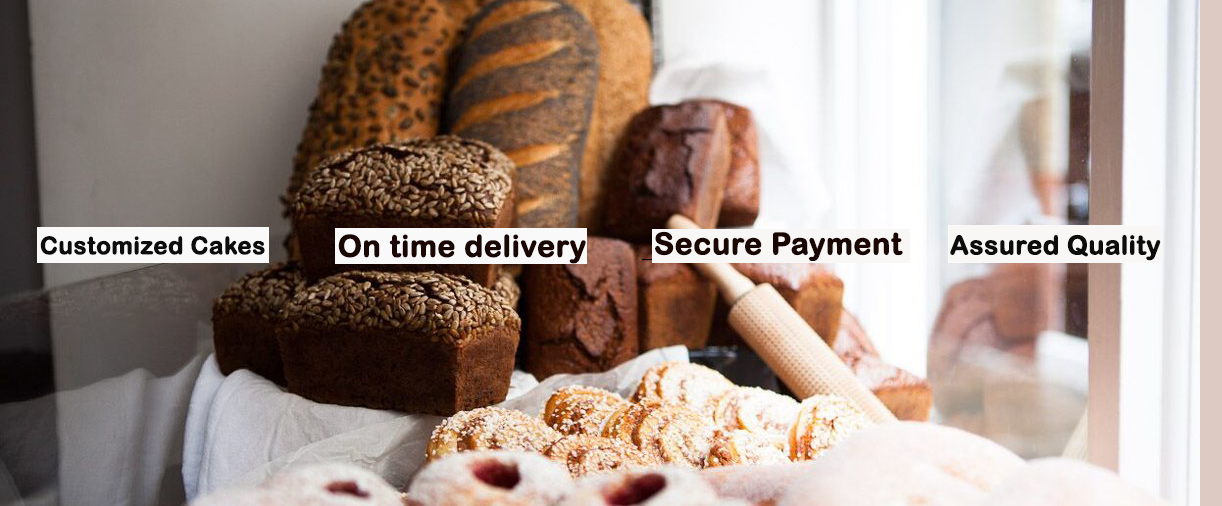
<style>
.page{position:relative;width:1222px;height:506px}
.page>*{position:absolute;margin:0}
.t1{font:30px "ArialRoundedMTBold";color:#1a0602;font-weight:bold}
.t2{font:24px "ArialRoundedMTBold";color:#0c0c0c;font-weight:bold}
.t3{font:26px "ArialRoundedMTBold";color:#0c0c0c;font-weight:bold}
</style>
<div class="page">
<p class="t1" style="left:655px;top:231px;width:248px;height:30px">Secure Payment</p>
<p class="t2" style="left:40px;top:236px;width:225px;height:19px">Customized Cakes</p>
<p class="t1" style="left:338px;top:234px;width:248px;height:30px">On time delivery</p>
<p class="t3" style="left:950px;top:234px;width:211px;height:27px">Assured Quality</p>
</div>
